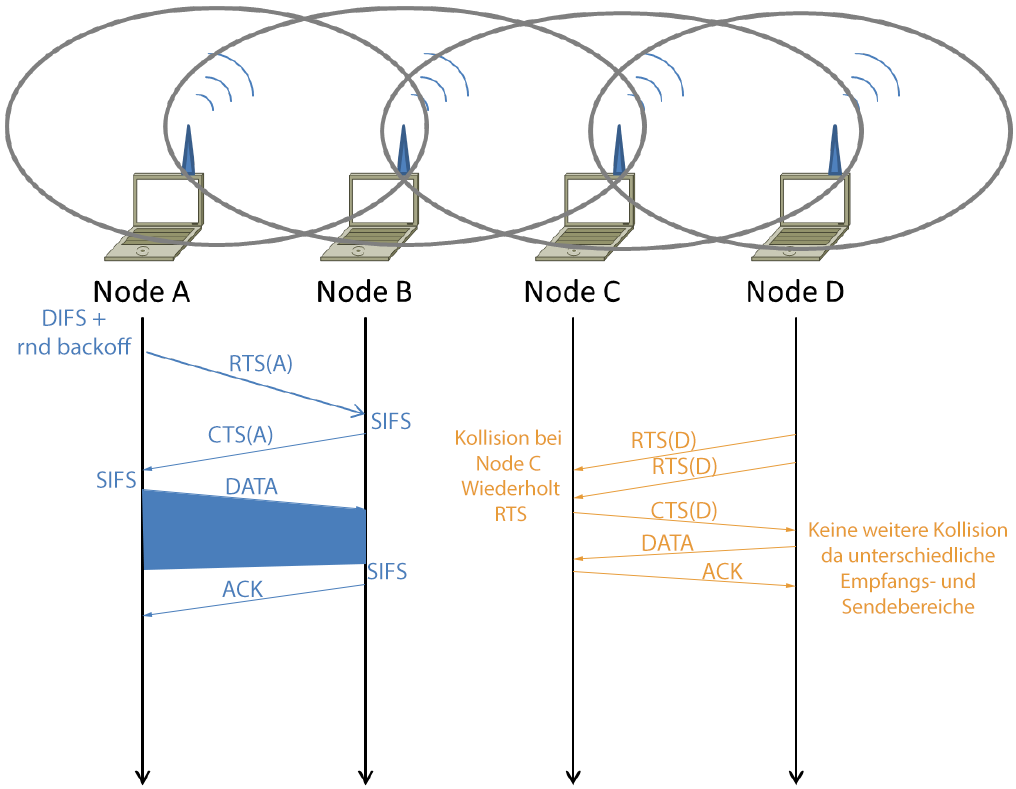
<style>
.page{position:relative;width:1016px;height:789px;background:#ffffff}
.page>*{position:absolute;margin:0}
.t1{font:24px "MyriadPro-Regular";color:#4a7ebb}
.t2{font:21.3px "MyriadPro-Regular";color:#e79b38}
.t3{font:24px "MyriadPro-Regular";color:#e79b38}
</style>
<div class="page">
<p class="t1" style="left:18px;top:309px;width:114px;height:46px;text-align:center">DIFS +<br>rnd backoff</p>
<p class="t1" style="left:230px;top:354px;width:62px;height:20px">RTS(A)</p>
<p class="t1" style="left:371px;top:412px;width:40px;height:18px">SIFS</p>
<p class="t1" style="left:208px;top:425px;width:65px;height:21px">CTS(A)</p>
<p class="t2" style="left:456px;top:429px;width:105px;height:42px;text-align:center">Kollision bei Node C</p>
<p class="t3" style="left:632px;top:431px;width:64px;height:20px">RTS(D)</p>
<p class="t3" style="left:653px;top:457px;width:64px;height:20px">RTS(D)</p>
<p class="t1" style="left:97px;top:471px;width:39px;height:17px">SIFS</p>
<p class="t1" style="left:226px;top:478px;width:52px;height:17px">DATA</p>
<p class="t2" style="left:461px;top:480px;width:99px;height:42px;text-align:center">Wiederholt<br>RTS</p>
<p class="t3" style="left:651px;top:501px;width:66px;height:20px">CTS(D)</p>
<p class="t2" style="left:809px;top:521px;width:198px;height:93px;text-align:center">Keine weitere Kollision da unterschiedliche Empfangs- und Sendebereiche</p>
<p class="t3" style="left:642px;top:534px;width:52px;height:17px">DATA</p>
<p class="t1" style="left:367px;top:562px;width:40px;height:18px">SIFS</p>
<p class="t3" style="left:702px;top:562px;width:41px;height:18px">ACK</p>
<p class="t1" style="left:222px;top:580px;width:41px;height:18px">ACK</p>
</div>
